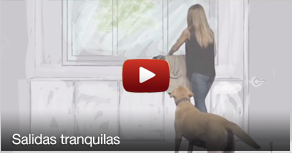
<style>
.page{position:relative;width:292px;height:153px}
.page>*{position:absolute;margin:0}
.t1{font:14px "HelveticaNeue-Roman";letter-spacing:-0.01em;color:#ffffff}
</style>
<div class="page">
<p class="t1" style="left:12px;top:133px;width:108px;height:14px">Salidas tranquilas</p>
</div>
